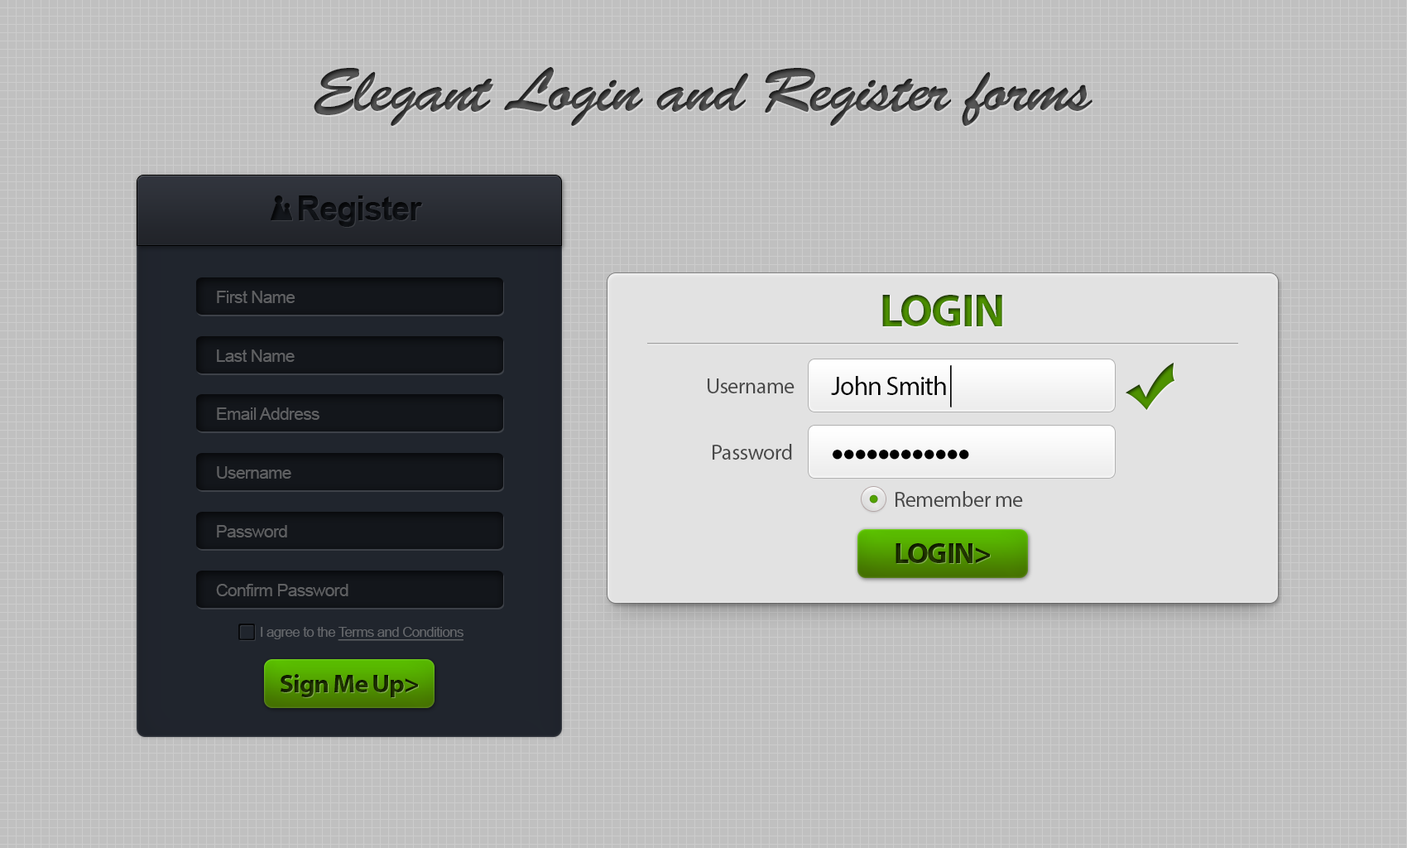
<style>
.page{position:relative;width:1407px;height:848px}
.page>*{position:absolute;margin:0}
.t1{font:62.1px "BrushScriptStd";letter-spacing:-0.03em}
.t2{font:33.5px "Arial-BoldMT";letter-spacing:-0.03em;color:#0c0e12}
.t3{font:17.2px "ArialMT";letter-spacing:-0.03em;color:#5f6062}
.t4{font:46.2px "MyriadPro-Bold";letter-spacing:-0.03em;color:#458000;text-transform:uppercase}
.t5{font:41.9px "MyriadPro-Regular";letter-spacing:-0.03em;color:#000000;scale:0.47 1}
.t6{font:26.6px "MyriadPro-Regular";letter-spacing:-0.03em;color:#000000}
.t7{font:22.1px "MyriadPro-Regular";letter-spacing:-0.03em;color:#494949}
.t8{font:45.7px "MyriadPro-Regular";letter-spacing:-0.03em;color:#000000}
.t9{font:29.3px "MyriadPro-Bold";letter-spacing:-0.03em;color:#1b2d00}
.t10{font:13.8px "ArialMT";letter-spacing:-0.03em;color:#64676b;text-decoration:underline}
.t11{font:13.8px "ArialMT";letter-spacing:-0.03em;color:#64676b}
.t12{font:25.9px "MyriadPro-Bold";letter-spacing:-0.03em;color:#1a2a00}
</style>
<div class="page">
<p class="t1" style="left:314px;top:67px;width:778px;height:59px">Elegant Login and Register forms</p>
<p class="t2" style="left:299px;top:195px;width:123px;height:32px">Register</p>
<p class="t3" style="left:217px;top:291px;width:78px;height:12px">First Name</p>
<p class="t4" style="left:882px;top:295px;width:120px;height:31px">Login</p>
<p class="t3" style="left:217px;top:349px;width:78px;height:13px">Last Name</p>
<p class="t5" style="left:950px;top:365px;width:2px;height:42px">|</p>
<p class="t6" style="left:831px;top:376px;width:115px;height:19px">John Smith</p>
<p class="t7" style="left:708px;top:378px;width:87px;height:15px">Username</p>
<p class="t3" style="left:217px;top:407px;width:102px;height:13px">Email Address</p>
<p class="t7" style="left:713px;top:444px;width:79px;height:15px">Password</p>
<p class="t8" style="left:833px;top:449px;width:136px;height:10px">••••••••••••</p>
<p class="t3" style="left:217px;top:466px;width:74px;height:12px">Username</p>
<p class="t7" style="left:896px;top:491px;width:127px;height:16px">Remember me</p>
<p class="t3" style="left:217px;top:525px;width:70px;height:12px">Password</p>
<p class="t9" style="left:896px;top:543px;width:94px;height:20px">LOGIN&gt;</p>
<p class="t3" style="left:216px;top:583px;width:132px;height:13px">Confirm Password</p>
<p class="t10" style="left:261px;top:627px;width:202px;height:14px"><span class="t11">I agree to the </span>Terms and Conditions</p>
<p class="t12" style="left:281px;top:674px;width:137px;height:23px">Sign Me Up&gt;</p>
</div>
